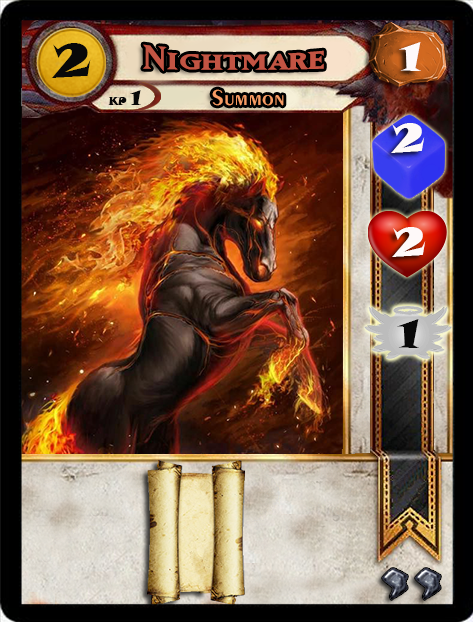
<style>
.page{position:relative;width:473px;height:622px}
.page>*{position:absolute;margin:0}
.t1{font:46.6px "SnapITC-Regular";color:#090909;scale:1.05 1}
.t2{font:40px "MatrixBoldSmallCaps";color:#c25443;scale:1.06 1}
.t3{font:40px "SnapITC-Regular";color:#fef9f9;scale:1.05 1}
.t4{font:22.7px "Exotic350BT-DemiBold";color:#f89c64;scale:1.06 1}
.t5{font:10.7px "SnapITC-Regular";color:#090909}
.t6{font:20.5px "SnapITC-Regular";color:#090909}
.t7{font:40px "SnapITC-Regular";color:#090909;scale:1.05 1}
</style>
<div class="page">
<p class="t1" style="left:51px;top:43px;width:40px;height:35px">2</p>
<p class="t2" style="left:143px;top:44px;width:181px;height:27px">Nightmare</p>
<p class="t3" style="left:399px;top:42px;width:22px;height:29px">1</p>
<p class="t4" style="left:212px;top:89px;width:72px;height:17px">Summon</p>
<p class="t5" style="left:108px;top:90px;width:33px;height:15px">KP <span class="t6">1</span></p>
<p class="t3" style="left:391px;top:123px;width:34px;height:30px">2</p>
<p class="t3" style="left:392px;top:227px;width:34px;height:30px">2</p>
<p class="t7" style="left:397px;top:319px;width:22px;height:29px">1</p>
</div>
